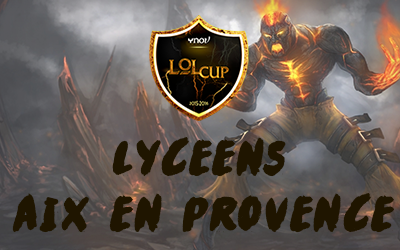
<style>
.page{position:relative;width:400px;height:250px}
.page>*{position:absolute;margin:0}
.t1{font:52.5px "RiverDrive";letter-spacing:0.118em;color:#1f1500;text-transform:uppercase}
</style>
<div class="page">
<p class="t1" style="left:112px;top:137px;width:174px;height:40px">lyceens</p>
<p class="t1" style="left:12px;top:193px;width:382px;height:40px">aix en provence</p>
</div>
